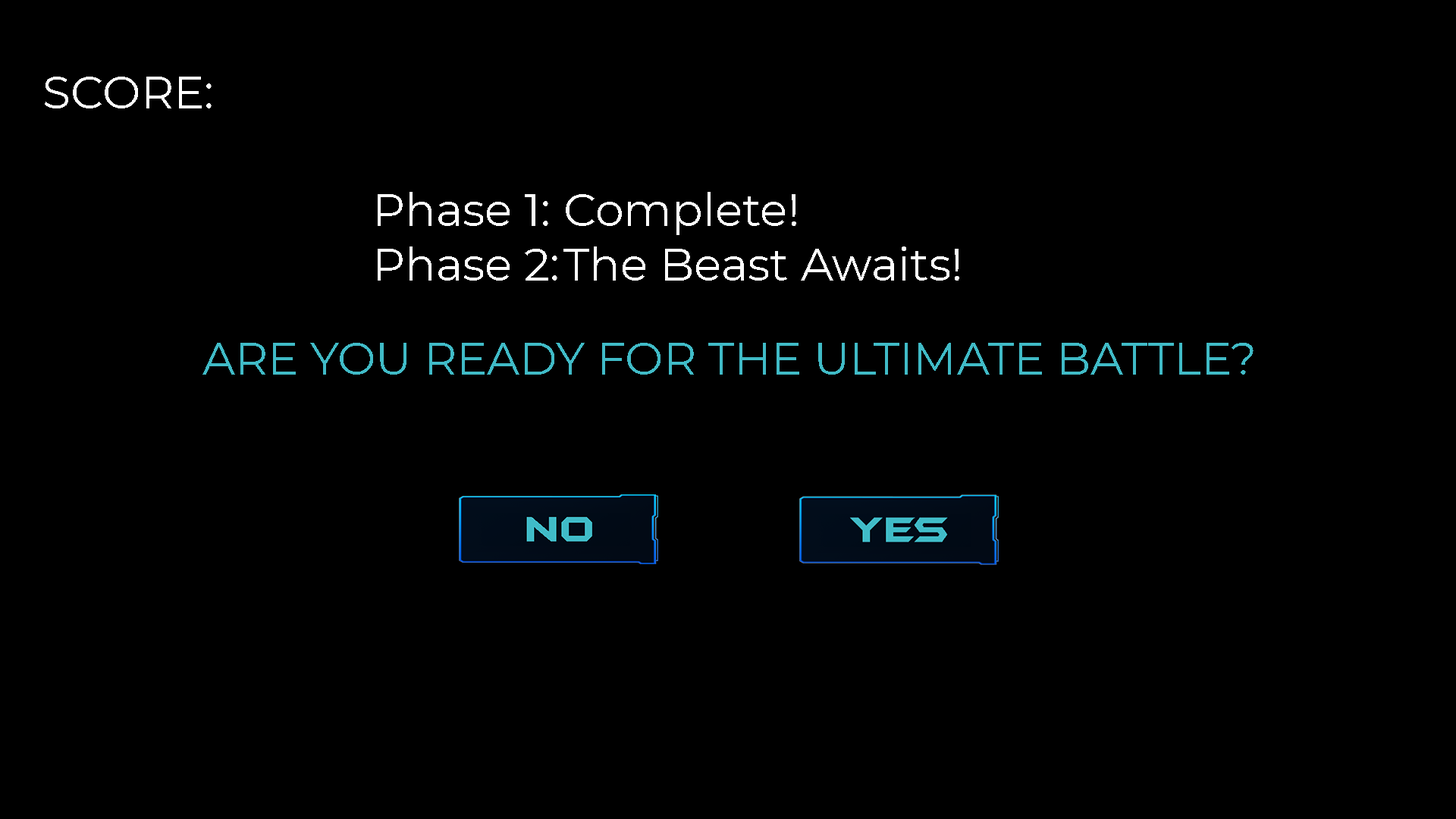
<style>
.page{position:relative;width:1456px;height:819px;background:#000000}
.page>*{position:absolute;margin:0}
.t1{font:46px "Montserrat-Regular";color:#fefefe}
.t2{font:46px "Montserrat-Regular";color:#40bbc7;text-transform:uppercase}
</style>
<div class="page">
<p class="t1" style="left:45px;top:77px;width:167px;height:31px">SCORE:</p>
<p class="t1" style="left:378px;top:192px;width:581px;height:89px">Phase 1: Complete!<br>Phase 2: The Beast Awaits!</p>
<p class="t2" style="left:202px;top:343px;width:1052px;height:32px">Are you ready for the ultimate battle?</p>
</div>
